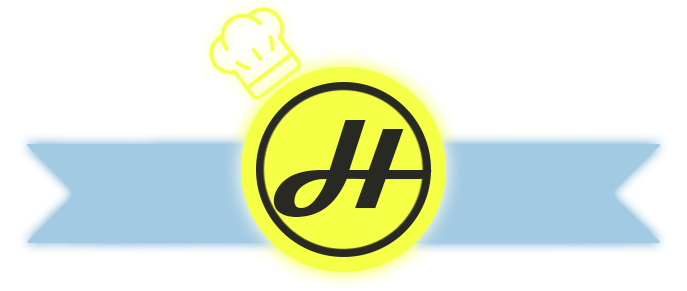
<style>
.page{position:relative;width:687px;height:291px;background:#ffffff}
.page>*{position:absolute;margin:0}
.t1{font:115px "Magneto-Bold";color:#282923}
</style>
<div class="page">
<p class="t1" style="left:273px;top:120px;width:159px;height:97px">H</p>
</div>
